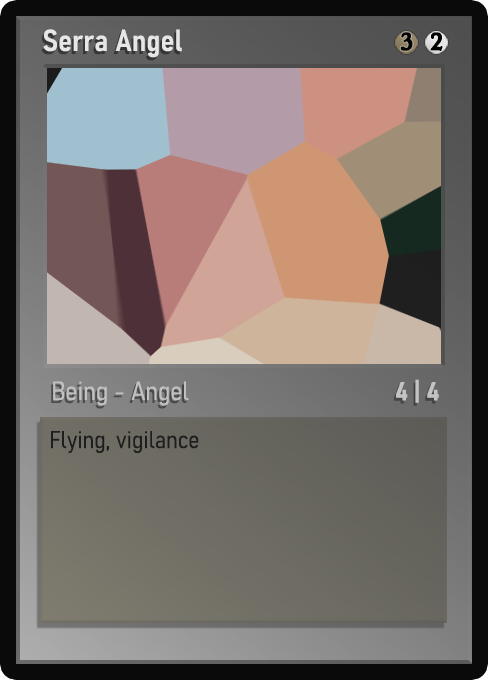
<style>
.page{position:relative;width:488px;height:680px}
.page>*{position:absolute;margin:0}
.t1{font:30px "Bahnschrift-SemiBoldSemiCondensed";color:#f2f2f2;font-weight:bold}
.t2{font:25px "WTRRoycroft";color:#000000;font-weight:bold;scale:1.09 1}
.t3{font:26px "Bahnschrift-LightSemiCondensed";color:#c8c8c8;font-weight:bold}
.t4{font:26px "Bahnschrift-BoldSemiCondensed";color:#c3c3c3;font-weight:bold}
.t5{font:24px "Bahnschrift-LightSemiCondensed";color:#1e1e1e;font-weight:bold}
</style>
<div class="page">
<p class="t1" style="left:43px;top:29px;width:139px;height:29px;opacity:0.9">Serra Angel</p>
<p class="t2" style="left:400px;top:32px;width:13px;height:19px">3</p>
<p class="t2" style="left:430px;top:32px;width:13px;height:19px">2</p>
<p class="t3" style="left:53px;top:381px;width:136px;height:25px;opacity:0.9">Being - Angel</p>
<p class="t4" style="left:396px;top:379px;width:43px;height:24px">4 | 4</p>
<p class="t5" style="left:51px;top:431px;width:148px;height:23px">Flying, vigilance</p>
</div>
